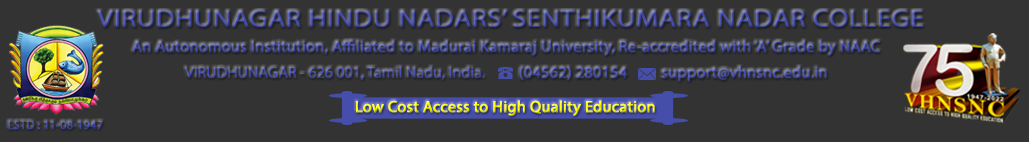
<style>
.page{position:relative;width:1029px;height:142px;background:#333333}
.page>*{position:absolute;margin:0}
.t1{font:24px "MyriadPro-Regular";color:#464eab;font-weight:bold;scale:1.16 1}
.t2{font:16px "MyriadPro-Regular";font-weight:bold}
.t3{font:16px "MyriadPro-Regular"}
.t4{font:12px "MyriadPro-Regular";color:#464eab;font-weight:bold}
</style>
<div class="page">
<p class="t1" style="left:97px;top:10px;width:827px;height:18px">VIRUDHUNAGAR HINDU NADARS’ SENTHIKUMARA NADAR COLLEGE</p>
<p class="t2" style="left:132px;top:40px;width:749px;height:16px">An Autonomous Institution, Affiliated to Madurai Kamaraj University, Re-accredited with ‘A’ Grade by NAAC</p>
<p class="t2" style="left:185px;top:66px;width:642px;height:16px"><span class="t3">VIRUDHUNAGAR - 626 001, Tamil Nadu, India.          </span>(04562) 280154          support@vhnsnc.edu.in</p>
<p class="t2" style="left:356px;top:100px;width:299px;height:16px">Low Cost Access to High Quality Education</p>
<p class="t4" style="left:8px;top:120px;width:95px;height:10px">ESTD : 11-08-1947</p>
</div>
